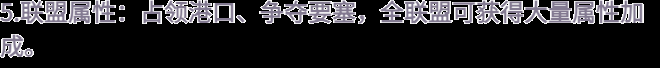
<style>
.page{position:relative;width:660px;height:68px;background:#000000}
.page>*{position:absolute;margin:0}
.t1{font:24px/34px "WebPSD-18463539-0-Regular";color:#837a91;font-weight:bold}
</style>
<div class="page">
<p class="t1" style="left:0px;top:0px;width:660px;height:68px">5.联盟属性：占领港口、争夺要塞，全联盟可获得大量属性加<br>成。</p>
</div>
